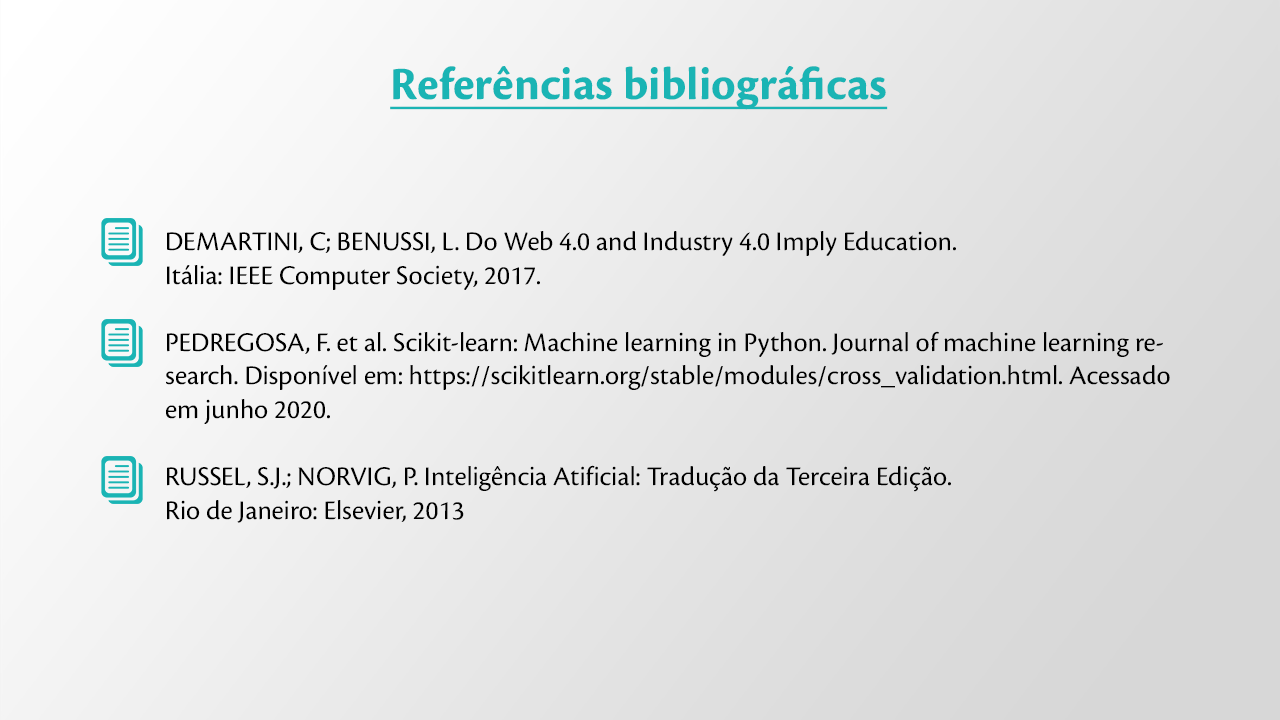
<style>
.page{position:relative;width:1280px;height:720px}
.page>*{position:absolute;margin:0}
.t1{font:48px "CronosPro-Bold";color:#1ab4b4;text-decoration:underline}
.t2{font:28px "CronosPro-Regular";color:#000000}
</style>
<div class="page">
<p class="t1" style="left:390px;top:66px;width:498px;height:44px">Referências bibliográficas</p>
<p class="t2" style="left:166px;top:231px;width:1004px;height:292px">DEMARTINI, C; BENUSSI, L. Do Web 4.0 and Industry 4.0 Imply Education. <br>Itália: IEEE Computer Society, 2017.<br><br>PEDREGOSA, F. et al. Scikit-learn: Machine learning in Python. Journal of machine learning research. Disponível em: https://scikitlearn.org/stable/modules/cross_validation.html. Acessado em junho 2020.<br><br>RUSSEL, S.J.; NORVIG, P. Inteligência Atificial: Tradução da Terceira Edição. <br>Rio de Janeiro: Elsevier, 2013</p>
</div>
